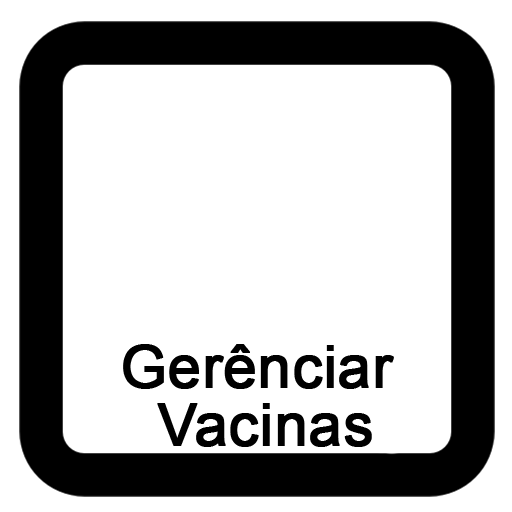
<style>
.page{position:relative;width:512px;height:512px;background:#ffffff}
.page>*{position:absolute;margin:0}
.t1{font:59.2px/58px "ArialMT";color:#000000;font-weight:bold}
</style>
<div class="page">
<p class="t1" style="left:123px;top:344px;width:271px;height:103px;text-align:center">Gerênciar <br>Vacinas</p>
</div>
